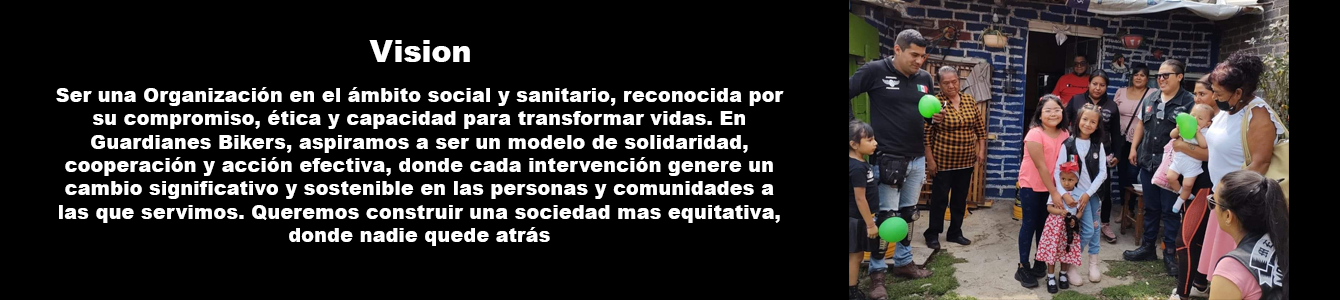
<style>
.page{position:relative;width:1340px;height:300px;background:#000000}
.page>*{position:absolute;margin:0}
.t1{font:30px "Arial-Black";color:#ffffff}
.t2{font:19.4px "Arial-Black";color:#ffffff}
</style>
<div class="page">
<p class="t1" style="left:369px;top:40px;width:101px;height:22px">Vision</p>
<p class="t2" style="left:56px;top:87px;width:728px;height:159px;text-align:center">Ser una Organización en el ámbito social y sanitario, reconocida por su compromiso, ética y capacidad para transformar vidas. En Guardianes Bikers, aspiramos a ser un modelo de solidaridad, cooperación y acción efectiva, donde cada intervención genere un cambio significativo y sostenible en las personas y comunidades a las que servimos. Queremos construir una sociedad mas equitativa, donde nadie quede atrás</p>
</div>
